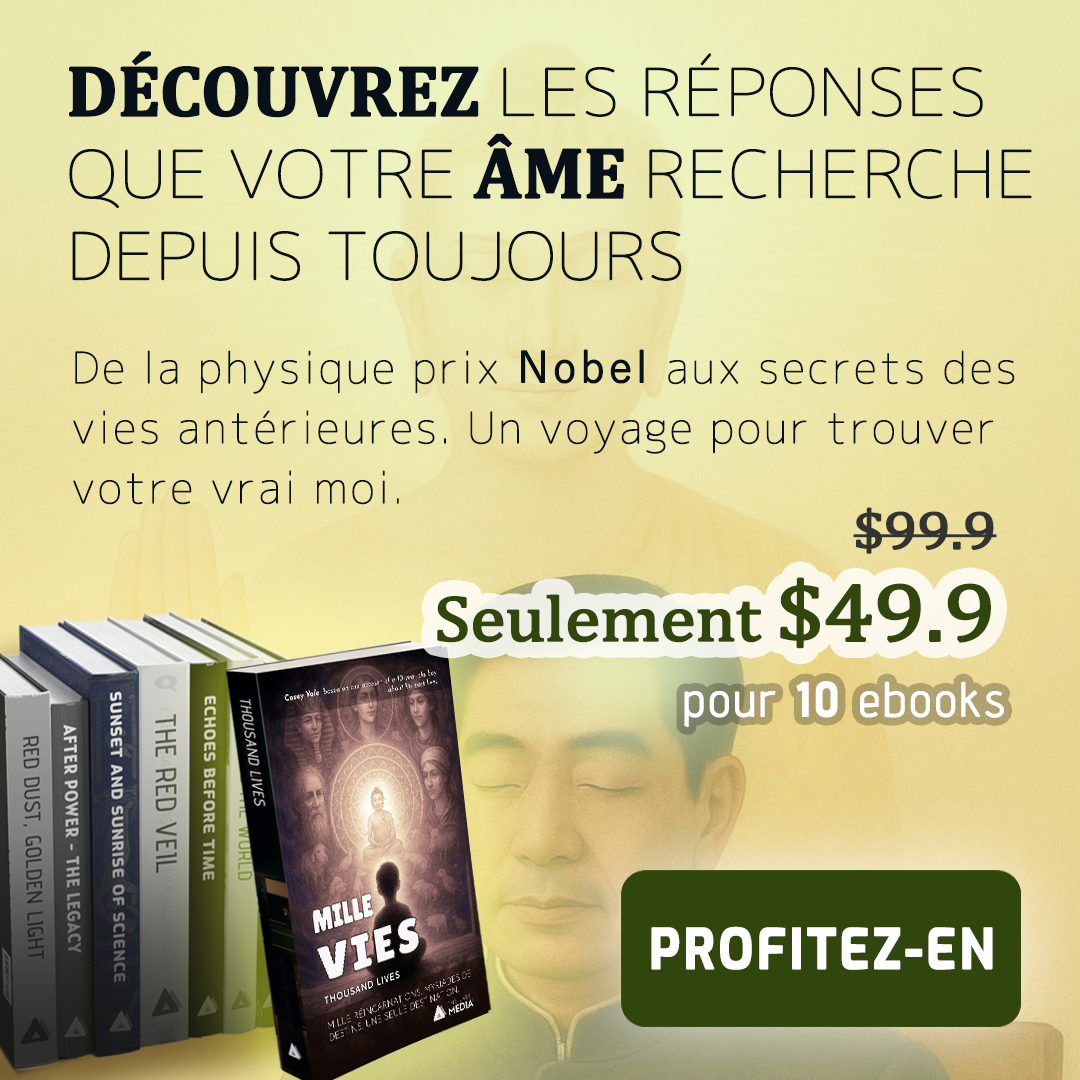
<style>
.page{position:relative;width:1080px;height:1080px}
.page>*{position:absolute;margin:0}
.t1{font:64.8px/82px "Chogokuboso-Gothic";letter-spacing:-0.015em;color:#08101a;font-weight:bold;scale:1.11 1}
.t2{font:72px/82px "Cambria-Bold";letter-spacing:-0.015em;color:#08101a;font-weight:bold}
.t3{font:43.2px/60px "Chogokuboso-Gothic";letter-spacing:0.05em;color:#08101a;font-weight:bold}
.t4{font:43.2px/60px "YuGothic-Regular";letter-spacing:0.05em;color:#08101a;font-weight:bold}
.t5{font:54px "Cambria";letter-spacing:-0.025em;color:#333333;font-weight:bold;scale:1.11 1}
.t6{font:64.8px "Cambria";letter-spacing:-0.025em;color:#31460c;font-weight:bold;scale:1.11 1}
.t7{font:54px "Cambria";letter-spacing:-0.025em;color:#31460c;font-weight:bold;scale:1.11 1}
.t8{font:82.8px "Cambria";letter-spacing:-0.025em;color:#31460c;font-weight:bold;scale:1.11 1}
.t9{font:48px "AdventPro-Regular";letter-spacing:0.05em;color:#ffffff;font-weight:bold}
.t10{font:48px "AdventPro-Bold";letter-spacing:0.05em;color:#ffffff;font-weight:bold}
.t11{font:55px "Exo-Bold";letter-spacing:0.05em;color:#fefefe;font-weight:bold;scale:0.9 1}
</style>
<div class="page">
<p class="t1" style="left:69px;top:51px;width:963px;height:230px"><span class="t2">DÉCOUVREZ </span>LES RÉPONSES QUE VOTRE<span class="t2"> ÂME </span>RECHERCHE DEPUIS TOUJOURS</p>
<p class="t3" style="left:73px;top:349px;width:942px;height:156px">De la physique prix <span class="t4">Nobel </span>aux secrets des vies antérieures. Un voyage pour trouver votre vrai moi.</p>
<p class="t5" style="left:853px;top:507px;width:144px;height:47px">$99.9</p>
<p class="t6" style="left:437px;top:577px;width:554px;height:72px"><span class="t7"><br></span>Seulement <span class="t8">$49.9</span></p>
<p class="t9" style="left:684px;top:681px;width:320px;height:47px">pour <span class="t10">10</span> ebooks</p>
<p class="t11" style="left:651px;top:926px;width:342px;height:44px">PROFITEZ-EN</p>
</div>
